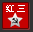
<style>
.page{position:relative;width:33px;height:32px;background:#c50000}
.page>*{position:absolute;margin:0}
.t1{font:10.4px "SimSun";color:#ffffff}
</style>
<div class="page">
<p class="t1" style="left:6px;top:5px;width:19px;height:7px">红三</p>
</div>
